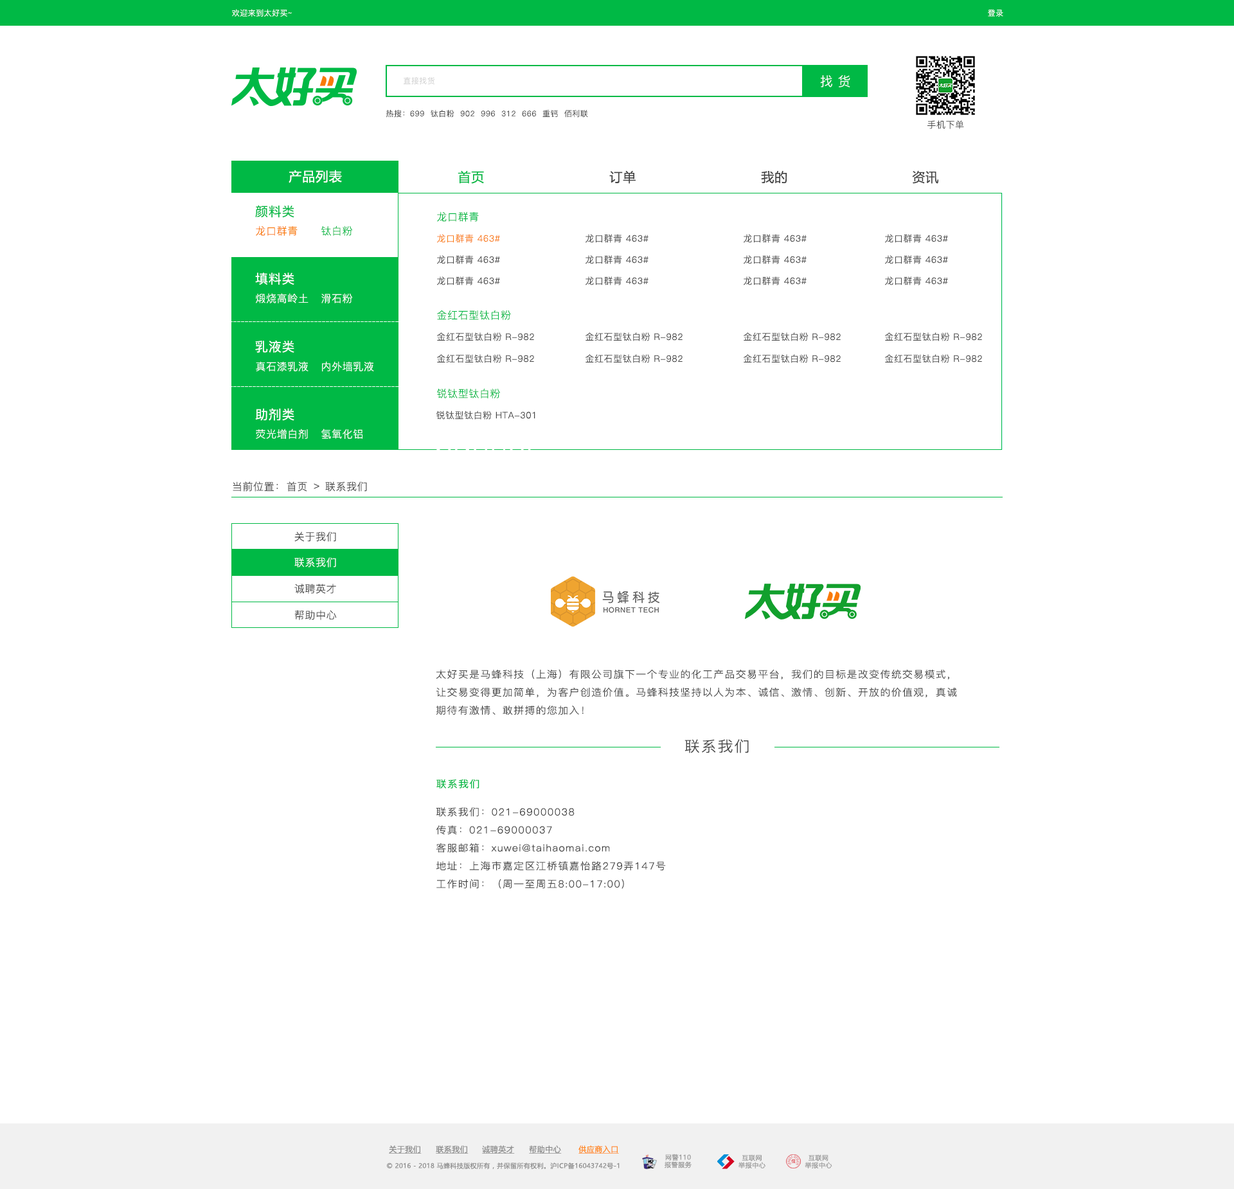
<style>
.page{position:relative;width:1234px;height:1189px;background:#ffffff}
.page>*{position:absolute;margin:0}
.t1{font:7.7px "PingFang-SC-Regular";letter-spacing:0.04em;color:#ffffff}
.t2{font:7.7px "PingFang-SC-Regular";letter-spacing:0.04em;color:#d2d2d2}
.t3{font:12.9px "PingFang-SC-Regular";letter-spacing:0.38em;color:#ffffff}
.t4{font:7.7px "PingFang-SC-Regular";letter-spacing:0.04em;color:#444444}
.t5{font:9px "PingFang-SC-Regular";letter-spacing:0.04em;color:#444444}
.t6{font:12.9px "MicrosoftYaHei";letter-spacing:0.04em;color:#ffffff}
.t7{font:12.9px "MicrosoftYaHei";letter-spacing:0.04em;color:#00b945}
.t8{font:12.9px "MicrosoftYaHei";letter-spacing:0.04em;color:#444444}
.t9{font:12.9px "PingFang-SC-Medium";letter-spacing:0.04em;color:#00b945}
.t10{font:10.3px "PingFang-SC-Regular";letter-spacing:0.04em;color:#00b945}
.t11{font:10.3px "PingFang-SC-Regular";letter-spacing:0.04em;color:#f97a08}
.t12{font:9px "PingFang-SC-Regular";letter-spacing:0.04em;color:#f97a08}
.t13{font:12.9px "PingFang-SC-Medium";letter-spacing:0.04em;color:#ffffff}
.t14{font:10.3px "PingFang-SC-Regular";letter-spacing:0.04em;color:#ffffff}
.t15{font:10.3px "PingFang-SC-Regular";letter-spacing:0.04em;color:#444444}
.t16{font:9.8px "PingFang-SC-Regular";letter-spacing:0.08em;color:#444444;scale:1.05 1}
.t17{font:14.7px "PingFang-SC-Regular";letter-spacing:0.08em;color:#444444;scale:1.05 1}
.t18{font:9.8px "PingFang-SC-Medium";letter-spacing:0.08em;color:#00b945;scale:1.05 1}
.t19{font:7.7px "MicrosoftYaHeiUI";letter-spacing:0.04em;color:#8c8c8c;text-decoration:underline}
.t20{font:7.7px "MicrosoftYaHeiUI";letter-spacing:0.04em;color:#ff8b25;text-decoration:underline}
.t21{font:6.4px/7.5px "MicrosoftYaHei";letter-spacing:0.06em;color:#999999}
.t22{font:6.4px "MicrosoftYaHeiUI";letter-spacing:0.04em;color:#8c8c8c}
</style>
<div class="page">
<p class="t1" style="left:232px;top:9px;width:60px;height:8px">欢迎来到太好买~</p>
<p class="t1" style="left:988px;top:9px;width:16px;height:8px">登录</p>
<p class="t2" style="left:404px;top:77px;width:31px;height:8px">直接找货</p>
<p class="t3" style="left:820px;top:75px;width:31px;height:12px">找货</p>
<p class="t4" style="left:386px;top:110px;width:202px;height:8px">热搜：699  钛白粉  902  996  312  666  重钙  佰利联</p>
<p class="t5" style="left:928px;top:120px;width:36px;height:9px">手机下单</p>
<p class="t6" style="left:289px;top:170px;width:53px;height:13px">产品列表</p>
<p class="t7" style="left:458px;top:170px;width:26px;height:14px">首页</p>
<p class="t8" style="left:609px;top:170px;width:27px;height:14px">订单</p>
<p class="t8" style="left:761px;top:170px;width:27px;height:14px">我的</p>
<p class="t8" style="left:912px;top:170px;width:27px;height:14px">资讯</p>
<p class="t9" style="left:255px;top:205px;width:39px;height:13px">颜料类</p>
<p class="t10" style="left:437px;top:212px;width:42px;height:10px">龙口群青</p>
<p class="t11" style="left:256px;top:226px;width:42px;height:10px">龙口群青</p>
<p class="t10" style="left:321px;top:226px;width:32px;height:10px">钛白粉</p>
<p class="t12" style="left:437px;top:234px;width:63px;height:9px">龙口群青 463#</p>
<p class="t5" style="left:586px;top:234px;width:63px;height:9px">龙口群青 463#</p>
<p class="t5" style="left:744px;top:234px;width:63px;height:9px">龙口群青 463#</p>
<p class="t5" style="left:885px;top:234px;width:63px;height:9px">龙口群青 463#</p>
<p class="t5" style="left:437px;top:255px;width:63px;height:9px">龙口群青 463#</p>
<p class="t5" style="left:586px;top:255px;width:63px;height:9px">龙口群青 463#</p>
<p class="t5" style="left:744px;top:255px;width:63px;height:9px">龙口群青 463#</p>
<p class="t5" style="left:885px;top:255px;width:63px;height:9px">龙口群青 463#</p>
<p class="t13" style="left:255px;top:273px;width:39px;height:12px">填料类</p>
<p class="t5" style="left:437px;top:276px;width:63px;height:9px">龙口群青 463#</p>
<p class="t5" style="left:586px;top:276px;width:63px;height:9px">龙口群青 463#</p>
<p class="t5" style="left:744px;top:276px;width:63px;height:9px">龙口群青 463#</p>
<p class="t5" style="left:885px;top:276px;width:63px;height:9px">龙口群青 463#</p>
<p class="t14" style="left:256px;top:293px;width:53px;height:10px">煅烧高岭土</p>
<p class="t14" style="left:321px;top:293px;width:32px;height:10px">滑石粉</p>
<p class="t10" style="left:437px;top:310px;width:74px;height:10px">金红石型钛白粉</p>
<p class="t13" style="left:255px;top:340px;width:39px;height:13px">乳液类</p>
<p class="t5" style="left:437px;top:332px;width:97px;height:9px">金红石型钛白粉 R-982</p>
<p class="t5" style="left:586px;top:332px;width:97px;height:9px">金红石型钛白粉 R-982</p>
<p class="t5" style="left:744px;top:332px;width:97px;height:9px">金红石型钛白粉 R-982</p>
<p class="t5" style="left:885px;top:332px;width:97px;height:9px">金红石型钛白粉 R-982</p>
<p class="t14" style="left:256px;top:361px;width:53px;height:11px">真石漆乳液</p>
<p class="t14" style="left:322px;top:361px;width:52px;height:11px">内外墙乳液</p>
<p class="t5" style="left:437px;top:354px;width:97px;height:9px">金红石型钛白粉 R-982</p>
<p class="t5" style="left:586px;top:354px;width:97px;height:9px">金红石型钛白粉 R-982</p>
<p class="t5" style="left:744px;top:354px;width:97px;height:9px">金红石型钛白粉 R-982</p>
<p class="t5" style="left:885px;top:354px;width:97px;height:9px">金红石型钛白粉 R-982</p>
<p class="t10" style="left:437px;top:388px;width:63px;height:11px">锐钛型钛白粉</p>
<p class="t13" style="left:255px;top:408px;width:39px;height:13px">助剂类</p>
<p class="t5" style="left:437px;top:411px;width:99px;height:9px">锐钛型钛白粉 HTA-301</p>
<p class="t14" style="left:256px;top:429px;width:52px;height:10px">荧光增白剂</p>
<p class="t14" style="left:321px;top:429px;width:42px;height:10px">氢氧化铝</p>
<p class="t15" style="left:233px;top:482px;width:45px;height:10px">当前位置：</p>
<p class="t15" style="left:287px;top:482px;width:20px;height:10px">首页</p>
<p class="t15" style="left:314px;top:483px;width:6px;height:6px">&gt;</p>
<p class="t15" style="left:325px;top:482px;width:42px;height:10px">联系我们</p>
<p class="t15" style="left:294px;top:532px;width:42px;height:10px">关于我们</p>
<p class="t14" style="left:294px;top:557px;width:42px;height:11px">联系我们</p>
<p class="t15" style="left:294px;top:584px;width:42px;height:10px">诚聘英才</p>
<p class="t15" style="left:294px;top:610px;width:43px;height:10px">帮助中心</p>
<p class="t16" style="left:436px;top:669px;width:521px;height:47px">太好买是马蜂科技（上海）有限公司旗下一个专业的化工产品交易平台，我们的目标是改变传统交易模式，<br>让交易变得更加简单，为客户创造价值。马蜂科技坚持以人为本、诚信、激情、创新、开放的价值观，真诚<br>期待有激情、敢拼搏的您加入！</p>
<p class="t17" style="left:685px;top:739px;width:64px;height:14px">联系我们</p>
<p class="t18" style="left:437px;top:779px;width:43px;height:10px">联系我们</p>
<p class="t16" style="left:436px;top:807px;width:230px;height:82px">联系我们：021-69000038<br>传真：021-69000037<br>客服邮箱：xuwei@taihaomai.com<br>地址：上海市嘉定区江桥镇嘉怡路279弄147号<br>工作时间：（周一至周五8:00-17:00）</p>
<p class="t19" style="left:389px;top:1146px;width:33px;height:8px">关于我们</p>
<p class="t19" style="left:436px;top:1146px;width:33px;height:8px">联系我们</p>
<p class="t19" style="left:482px;top:1146px;width:33px;height:8px">诚聘英才</p>
<p class="t19" style="left:529px;top:1146px;width:33px;height:8px">帮助中心</p>
<p class="t20" style="left:579px;top:1146px;width:40px;height:8px">供应商入口</p>
<p class="t21" style="left:665px;top:1154px;width:27px;height:15px;text-align:center">网警110<br>报警服务</p>
<p class="t21" style="left:739px;top:1155px;width:27px;height:14px;text-align:center">互联网<br>举报中心</p>
<p class="t21" style="left:805px;top:1155px;width:28px;height:14px;text-align:center">互联网<br>举报中心</p>
<p class="t22" style="left:387px;top:1162px;width:233px;height:7px">© 2016 - 2018 马蜂科技版权所有，并保留所有权利。沪ICP备16043742号-1</p>
</div>
